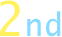
<style>
.page{position:relative;width:62px;height:37px;background:#ffffff}
.page>*{position:absolute;margin:0}
.t1{font:32px "LucidaSans-Typewriter"}
.t2{font:48px "LucidaSans-Typewriter"}
</style>
<div class="page">
<p class="t1" style="left:0px;top:0px;width:61px;height:37px"><span class="t2">2</span>nd</p>
</div>
